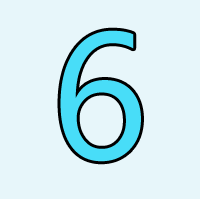
<style>
.page{position:relative;width:200px;height:200px;background:#e7f6fa}
.page>*{position:absolute;margin:0}
.t1{font:180px "MicrosoftPhagsPa";color:#48ddf8}
</style>
<div class="page">
<p class="t1" style="left:60px;top:30px;width:81px;height:132px">6</p>
</div>
